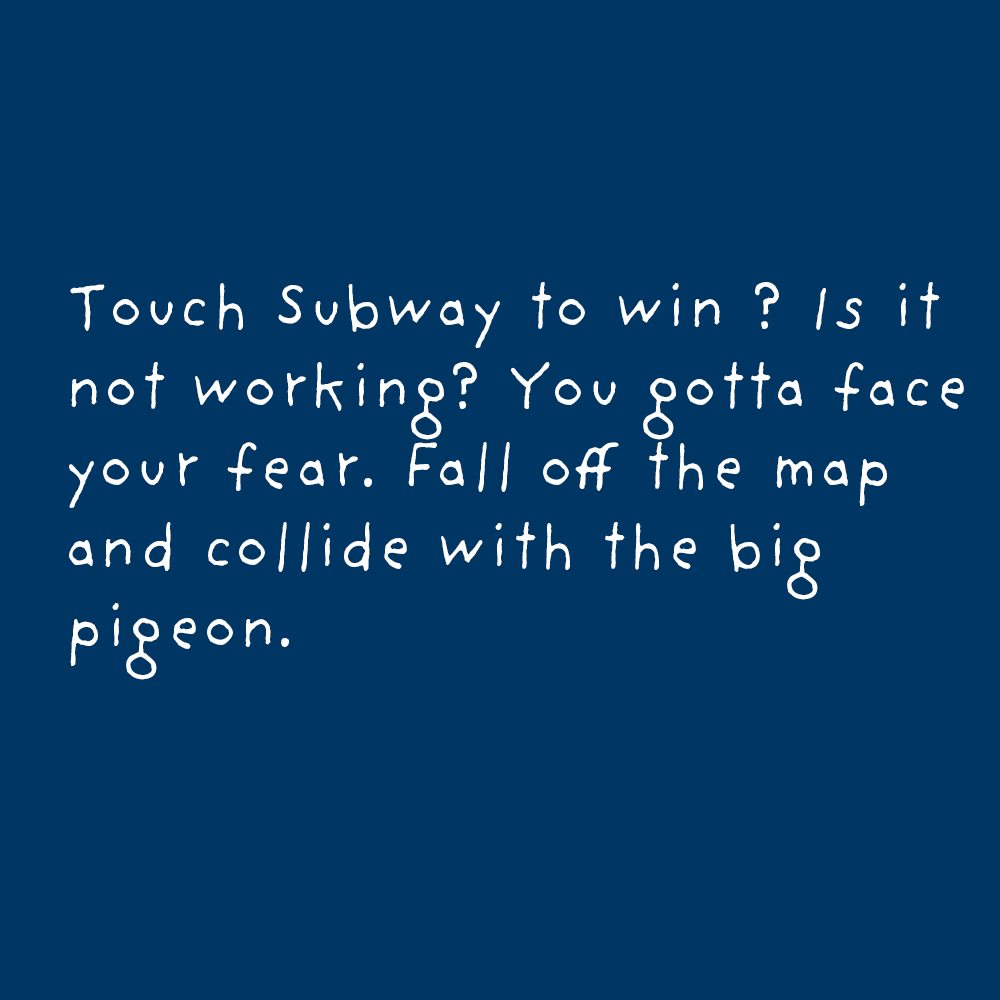
<style>
.page{position:relative;width:1000px;height:1000px;background:#003663}
.page>*{position:absolute;margin:0}
.t1{font:66.7px "ProvidenceSansPro";color:#ffffff}
</style>
<div class="page">
<p class="t1" style="left:69px;top:282px;width:895px;height:398px">Touch Subway to win ? Is it not working? You gotta face your fear. Fall off the map and collide with the big pigeon.</p>
</div>
